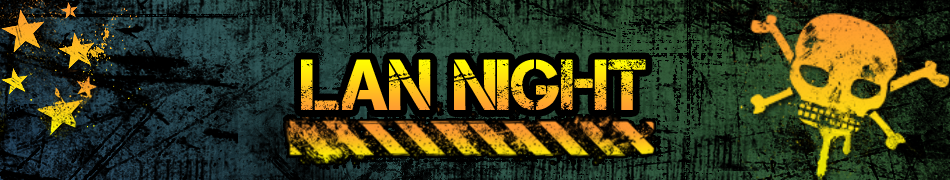
<style>
.page{position:relative;width:950px;height:180px}
.page>*{position:absolute;margin:0}
.t1{font:72px "Captureit"}
</style>
<div class="page">
<p class="t1" style="left:301px;top:59px;width:345px;height:51px">LAN NIGHT</p>
</div>
